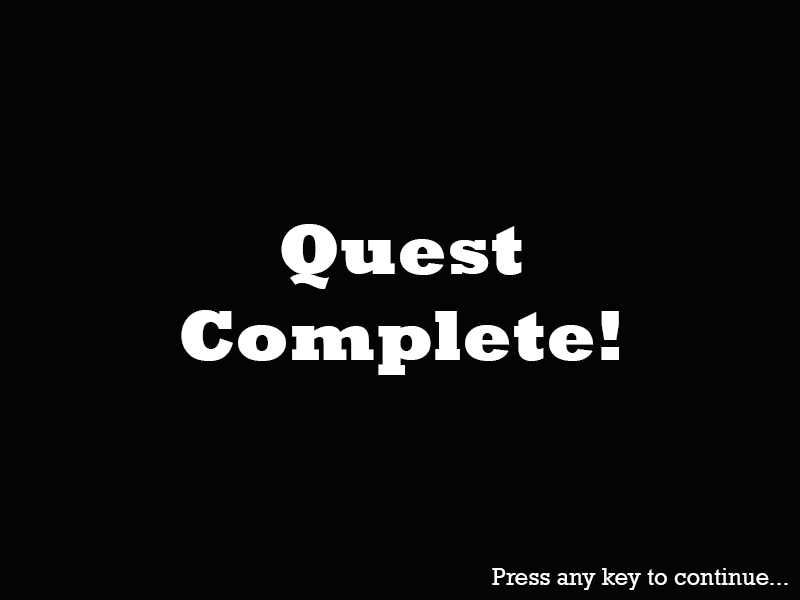
<style>
.page{position:relative;width:800px;height:600px;background:#040404}
.page>*{position:absolute;margin:0}
.t1{font:72px "Rockwell-ExtraBold";color:#ffffff}
.t2{font:24px "Rockwell";color:#ffffff}
</style>
<div class="page">
<p class="t1" style="left:181px;top:224px;width:438px;height:151px;text-align:center">Quest<br>Complete!</p>
<p class="t2" style="left:492px;top:568px;width:296px;height:22px">Press any key to continue...</p>
</div>
